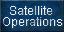
<style>
.page{position:relative;width:64px;height:32px}
.page>*{position:absolute;margin:0}
.t1{font:12px/11.3px "ArialMT";color:#efefef}
</style>
<div class="page">
<p class="t1" style="left:3px;top:6px;width:59px;height:22px;text-align:center">Satellite<br> Operations</p>
</div>
